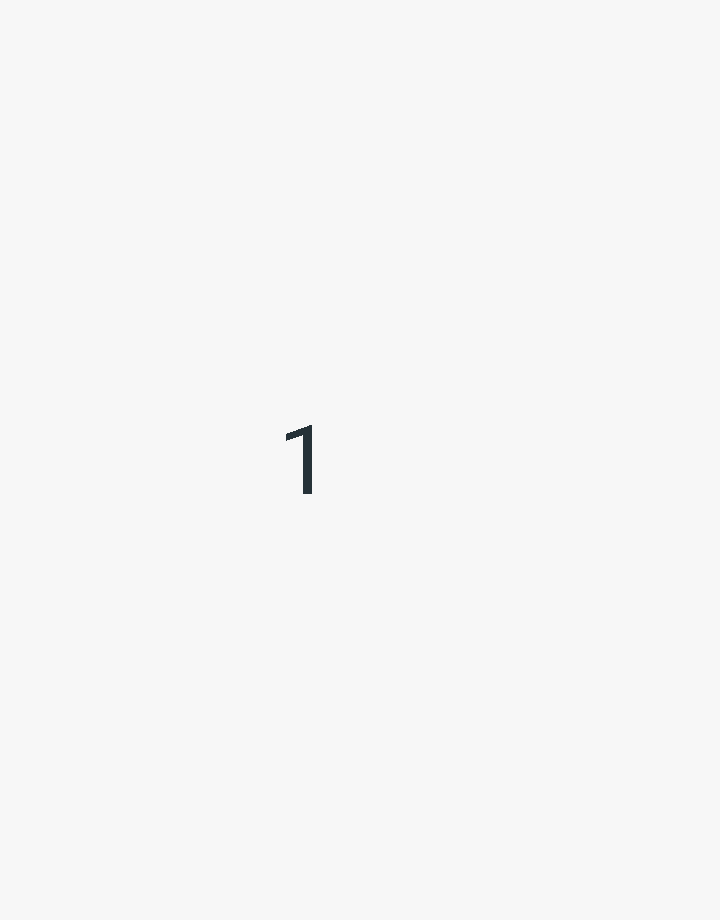
<style>
.page{position:relative;width:720px;height:920px;background:#f7f7f7}
.page>*{position:absolute;margin:0}
.t1{font:96px "Roboto-Regular";letter-spacing:-0.005em;color:#263238}
</style>
<div class="page">
<p class="t1" style="left:286px;top:425px;width:26px;height:69px">1</p>
</div>
